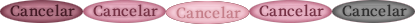
<style>
.page{position:relative;width:415px;height:24px;background:#ffffff}
.page>*{position:absolute;margin:0}
.t1{font:17px "OfficialFateFont-Medium";color:#441a25;font-weight:bold}
.t2{font:17px "OfficialFateFont-Medium";color:#763145;font-weight:bold}
.t3{font:17px "OfficialFateFont-Medium";color:#c57e89;font-weight:bold}
.t4{font:17px "OfficialFateFont-Medium";color:#2f2f2f;font-weight:bold}
</style>
<div class="page">
<p class="t1" style="left:10px;top:4px;width:65px;height:13px">Cancelar</p>
<p class="t2" style="left:93px;top:4px;width:65px;height:13px">Cancelar</p>
<p class="t3" style="left:176px;top:6px;width:65px;height:13px">Cancelar</p>
<p class="t2" style="left:259px;top:4px;width:65px;height:13px">Cancelar</p>
<p class="t4" style="left:342px;top:4px;width:65px;height:13px">Cancelar</p>
</div>
